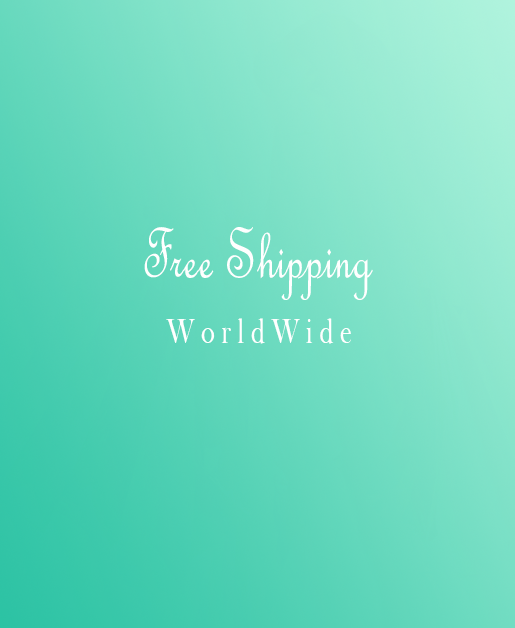
<style>
.page{position:relative;width:515px;height:628px}
.page>*{position:absolute;margin:0}
.t1{font:76.8px "FrenchScriptMT";color:#ffffff;scale:0.71 1}
.t2{font:35.3px "BaskervilleOldFacDEE";color:#ffffff;scale:0.76 1}
</style>
<div class="page">
<p class="t1" style="left:144px;top:227px;width:229px;height:73px">Free Shipping</p>
<p class="t2" style="left:166px;top:318px;width:185px;height:26px">W o r l d W i d e</p>
</div>
